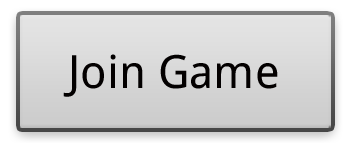
<style>
.page{position:relative;width:347px;height:143px}
.page>*{position:absolute;margin:0}
.t1{font:45.8px "DroidSans";color:#030000}
</style>
<div class="page">
<p class="t1" style="left:63px;top:54px;width:215px;height:43px">Join Game</p>
</div>
